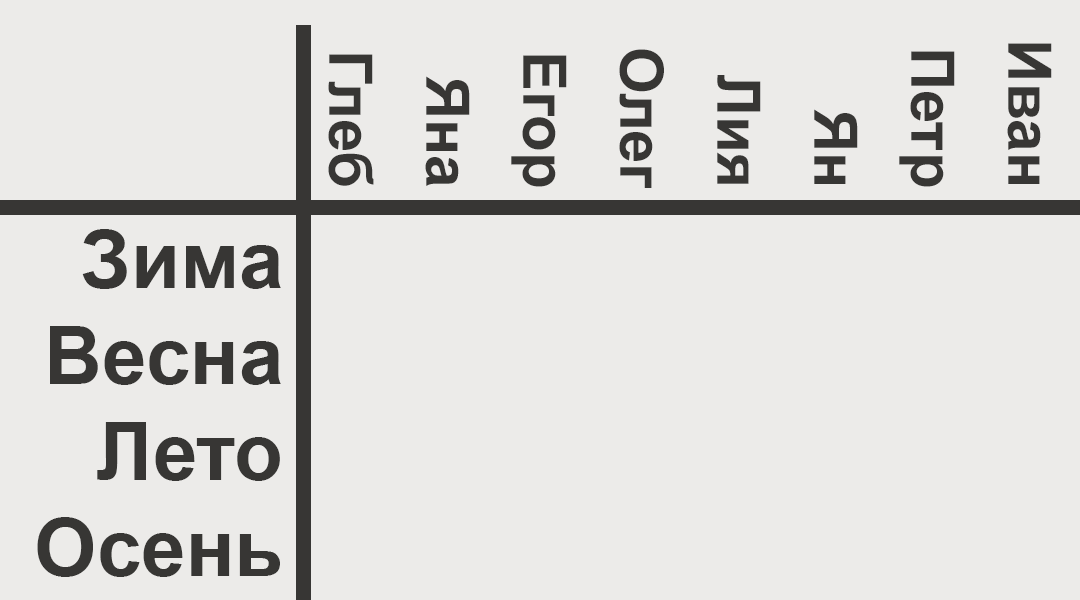
<style>
.page{position:relative;width:1080px;height:600px;background:#ecebe9}
.page>*{position:absolute;margin:0}
.t1{font:60px/97px "Arial-BoldMT";color:#373634}
.t2{font:80px "Arial-BoldMT";color:#373634}
</style>
<div class="page">
<p class="t1" style="left:328px;top:43px;width:724px;height:145px;text-align:right;rotate:90deg">Иван<br>Петр<br>Ян<br>Лия<br>Олег<br>Егор<br>Яна<br>Глеб</p>
<p class="t2" style="left:37px;top:229px;width:244px;height:348px;text-align:right">Зима<br>Весна<br>Лето<br>Осень</p>
</div>
